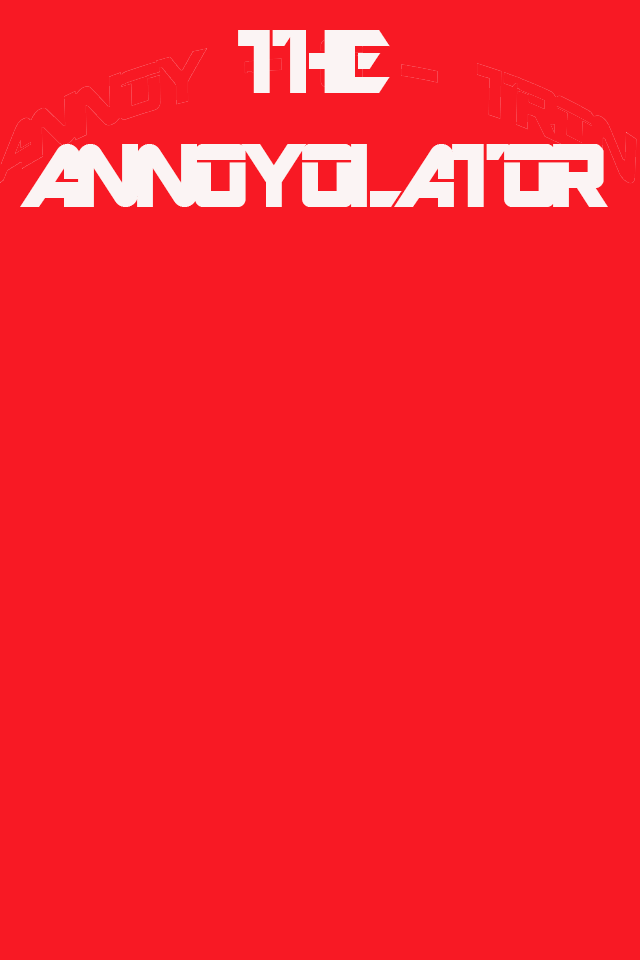
<style>
.page{position:relative;width:640px;height:960px;background:#f81924}
.page>*{position:absolute;margin:0}
.t1{font:99.8px "ARDESTINE";letter-spacing:-0.075em;color:#fbf4f4;text-transform:uppercase}
</style>
<div class="page">
<p class="t1" style="left:20px;top:30px;width:588px;height:177px;text-align:center">The<br>Annoyolator</p>
</div>
